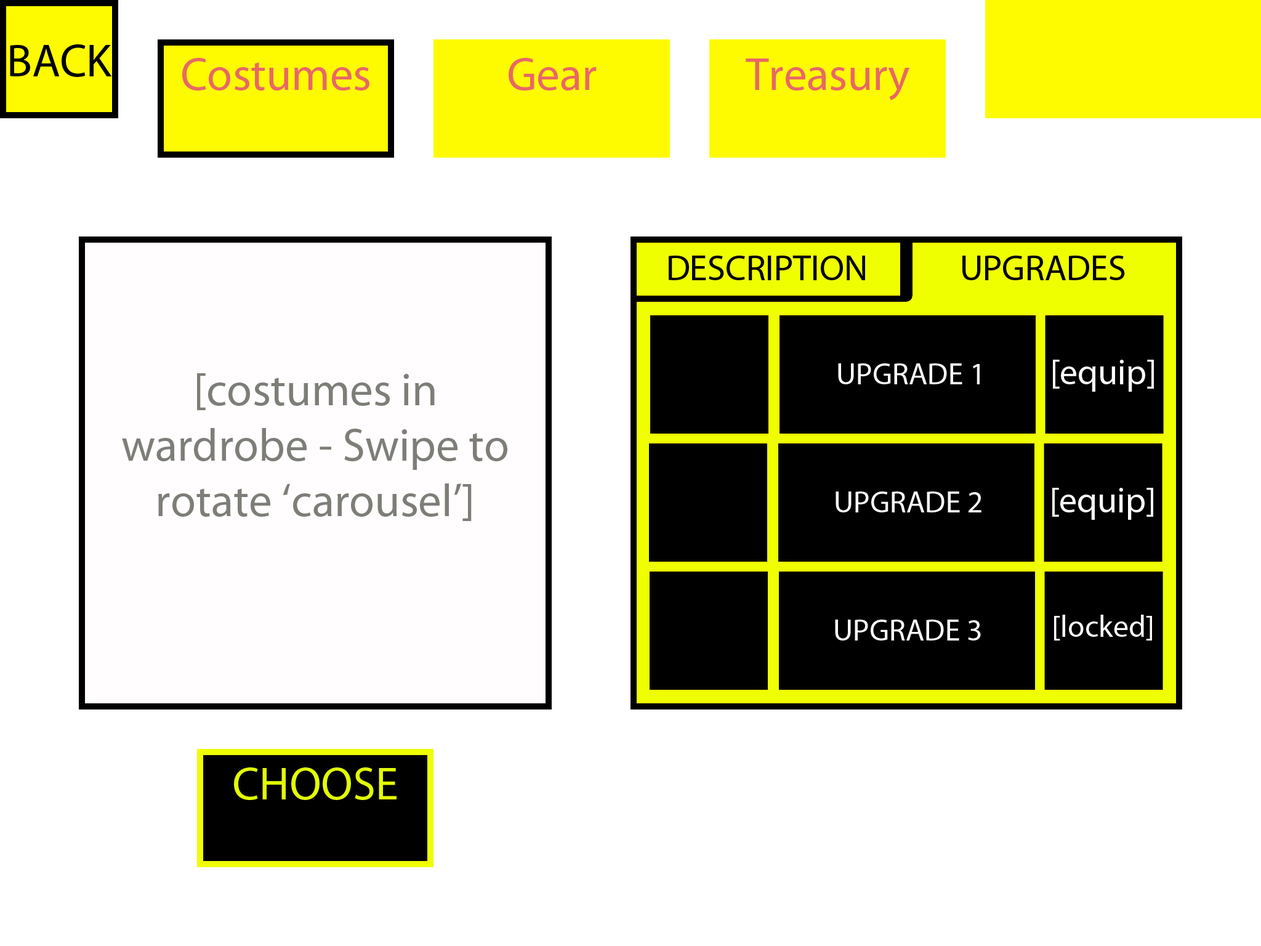
<style>
.page{position:relative;width:1261px;height:946px;background:#ffffff}
.page>*{position:absolute;margin:0}
.t1{font:46.2px "MyriadPro-Regular";color:#010101}
.t2{font:46.2px "MyriadPro-Regular";color:#e96767}
.t3{font:35.9px "MyriadPro-Regular";color:#030303}
.t4{font:30.8px "MyriadPro-Regular";color:#fcfcfc}
.t5{font:35.9px "MyriadPro-Regular";color:#fcfcfc}
.t6{font:46.2px "MyriadPro-Regular";color:#7d7e78}
.t7{font:46.2px "MyriadPro-Regular";color:#e3fe03}
</style>
<div class="page">
<p class="t1" style="left:10px;top:44px;width:102px;height:33px">BACK</p>
<p class="t2" style="left:182px;top:58px;width:187px;height:33px">Costumes</p>
<p class="t2" style="left:509px;top:58px;width:88px;height:33px">Gear</p>
<p class="t2" style="left:746px;top:58px;width:163px;height:42px">Treasury</p>
<p class="t3" style="left:669px;top:256px;width:196px;height:24px">DESCRIPTION</p>
<p class="t3" style="left:962px;top:256px;width:163px;height:24px">UPGRADES</p>
<p class="t4" style="left:838px;top:363px;width:142px;height:21px">UPGRADE 1</p>
<p class="t5" style="left:1053px;top:360px;width:101px;height:32px">[equip]</p>
<p class="t6" style="left:122px;top:373px;width:385px;height:148px;text-align:center">[costumes in <br>wardrobe - Swipe to rotate ‘carousel’]</p>
<p class="t4" style="left:835px;top:491px;width:146px;height:21px">UPGRADE 2</p>
<p class="t5" style="left:1052px;top:488px;width:101px;height:32px">[equip]</p>
<p class="t4" style="left:1054px;top:614px;width:98px;height:26px">[locked]</p>
<p class="t4" style="left:835px;top:619px;width:146px;height:21px">UPGRADE 3</p>
<p class="t7" style="left:234px;top:767px;width:162px;height:33px">CHOOSE</p>
</div>
